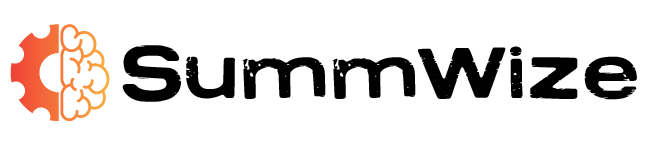
<style>
.page{position:relative;width:650px;height:150px;background:#ffffff}
.page>*{position:absolute;margin:0}
.t1{font:74.1px "Neuzon";color:#010101}
</style>
<div class="page">
<p class="t1" style="left:122px;top:45px;width:515px;height:57px">SummWize</p>
</div>
